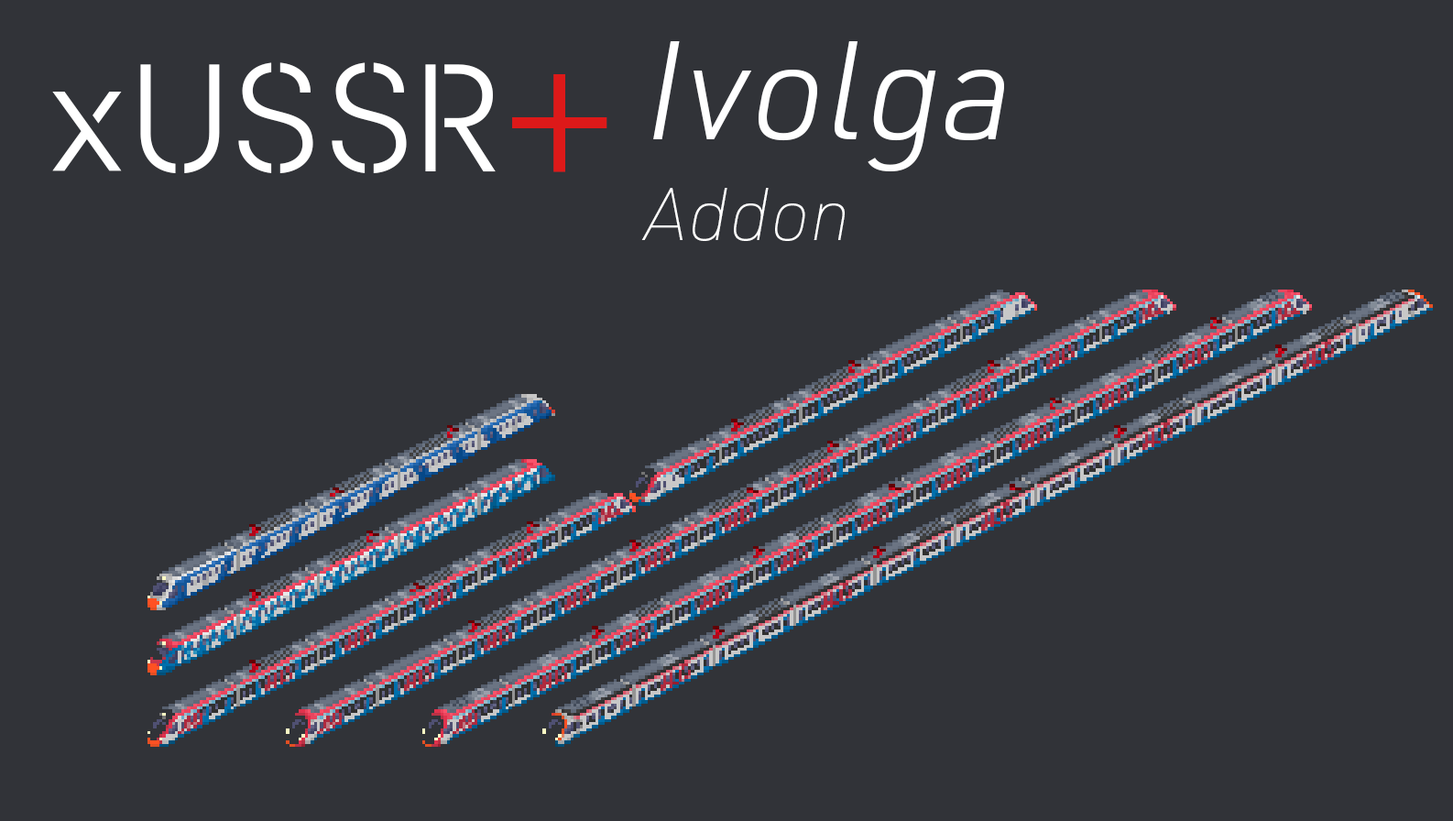
<style>
.page{position:relative;width:1453px;height:821px;background:#313338}
.page>*{position:absolute;margin:0}
.t1{font:137.4px/100.8px "URWDIN-LightItalic";color:#ffffff}
.t2{font:73.3px/100.8px "URWDIN-ThinItalic";color:#ffffff}
.t3{font:183.2px "SukimaRegular";color:#ffffff}
.t4{font:183.2px "MyriadPro-Regular";color:#dd1919}
</style>
<div class="page">
<p class="t1" style="left:641px;top:41px;width:363px;height:200px">Ivolga<br><span class="t2">Addon</span></p>
<p class="t3" style="left:52px;top:62px;width:555px;height:112px">xUSSR<span class="t4">+</span>+</p>
</div>
